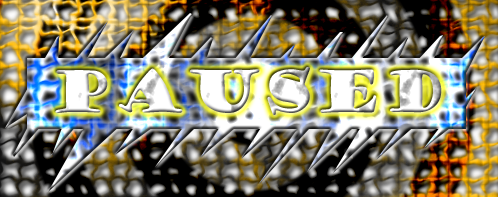
<style>
.page{position:relative;width:498px;height:197px}
.page>*{position:absolute;margin:0}
.t1{font:57px "GoudyStout";color:#ffffff}
</style>
<div class="page">
<p class="t1" style="left:55px;top:67px;width:387px;height:48px">Paused</p>
</div>
